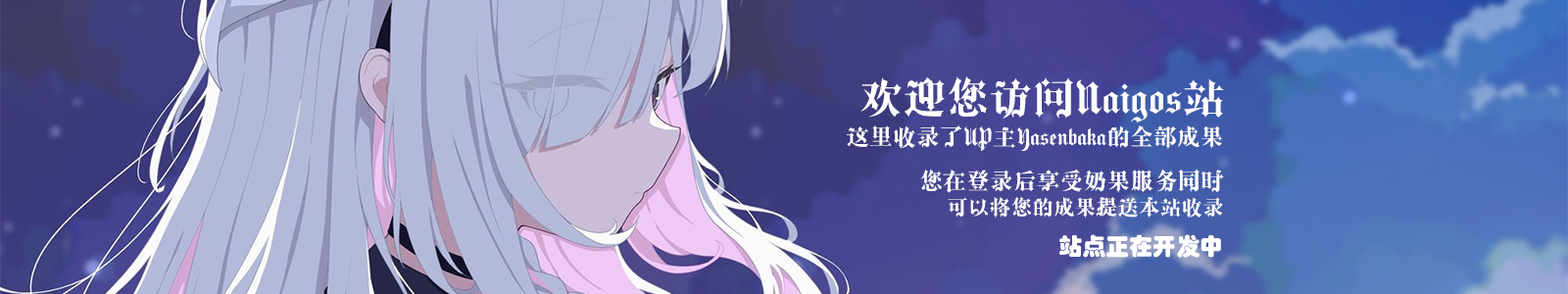
<style>
.page{position:relative;width:1568px;height:294px}
.page>*{position:absolute;margin:0}
.t1{font:43.2px "REEJIStar-LiLing-Gothic-GB";color:#ffffff}
.t2{font:23.4px "REEJIStar-LiLing-Gothic-GB";color:#ffffff}
.t3{font:21.3px "REEJIStar-LiLing-Gothic-GB";color:#ffffff}
.t4{font:23.4px "STHupo";color:#ffffff}
</style>
<div class="page">
<p class="t1" style="left:860px;top:75px;width:364px;height:47px">欢迎您访问Naigos站</p>
<p class="t2" style="left:847px;top:125px;width:375px;height:26px">这里收录了UP主Yasenbaka的全部成果</p>
<p class="t2" style="left:920px;top:169px;width:304px;height:24px">您在登录后享受奶果服务同时</p>
<p class="t3" style="left:948px;top:196px;width:275px;height:23px">可以将您的成果提送本站收录</p>
<p class="t4" style="left:1059px;top:234px;width:162px;height:24px">站点正在开发中</p>
</div>
